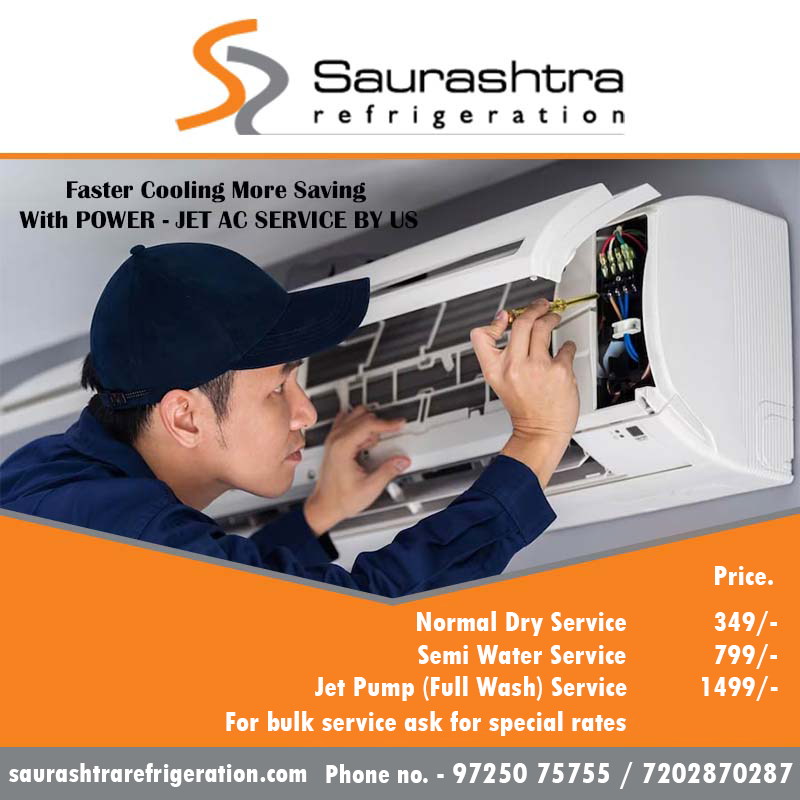
<style>
.page{position:relative;width:800px;height:800px}
.page>*{position:absolute;margin:0}
.t1{font:29px "TwCenMT-CondensedExtraBold";color:#ffffff}
.t2{font:28px "TwCenMT-CondensedExtraBold";color:#ffffff}
.t3{font:31px "TwCenMT-CondensedExtraBold";color:#ffffff}
</style>
<div class="page">
<p class="t1" style="left:715px;top:566px;width:58px;height:19px">Price.</p>
<p class="t1" style="left:417px;top:611px;width:209px;height:25px">Normal Dry Service</p>
<p class="t1" style="left:714px;top:611px;width:63px;height:25px">349/-</p>
<p class="t1" style="left:418px;top:645px;width:208px;height:19px">Semi Water Service</p>
<p class="t1" style="left:715px;top:644px;width:62px;height:25px">799/-</p>
<p class="t1" style="left:315px;top:676px;width:312px;height:25px">Jet Pump (Full Wash) Service</p>
<p class="t1" style="left:702px;top:676px;width:76px;height:25px">1499/-</p>
<p class="t1" style="left:226px;top:711px;width:400px;height:25px">For bulk service ask for special rates</p>
<p class="t2" style="left:9px;top:763px;width:298px;height:24px">saurashtrarefrigeration.com</p>
<p class="t3" style="left:326px;top:762px;width:467px;height:27px"><span class="t2">Phone no. - </span>97250 75755 / 7202870287</p>
</div>
